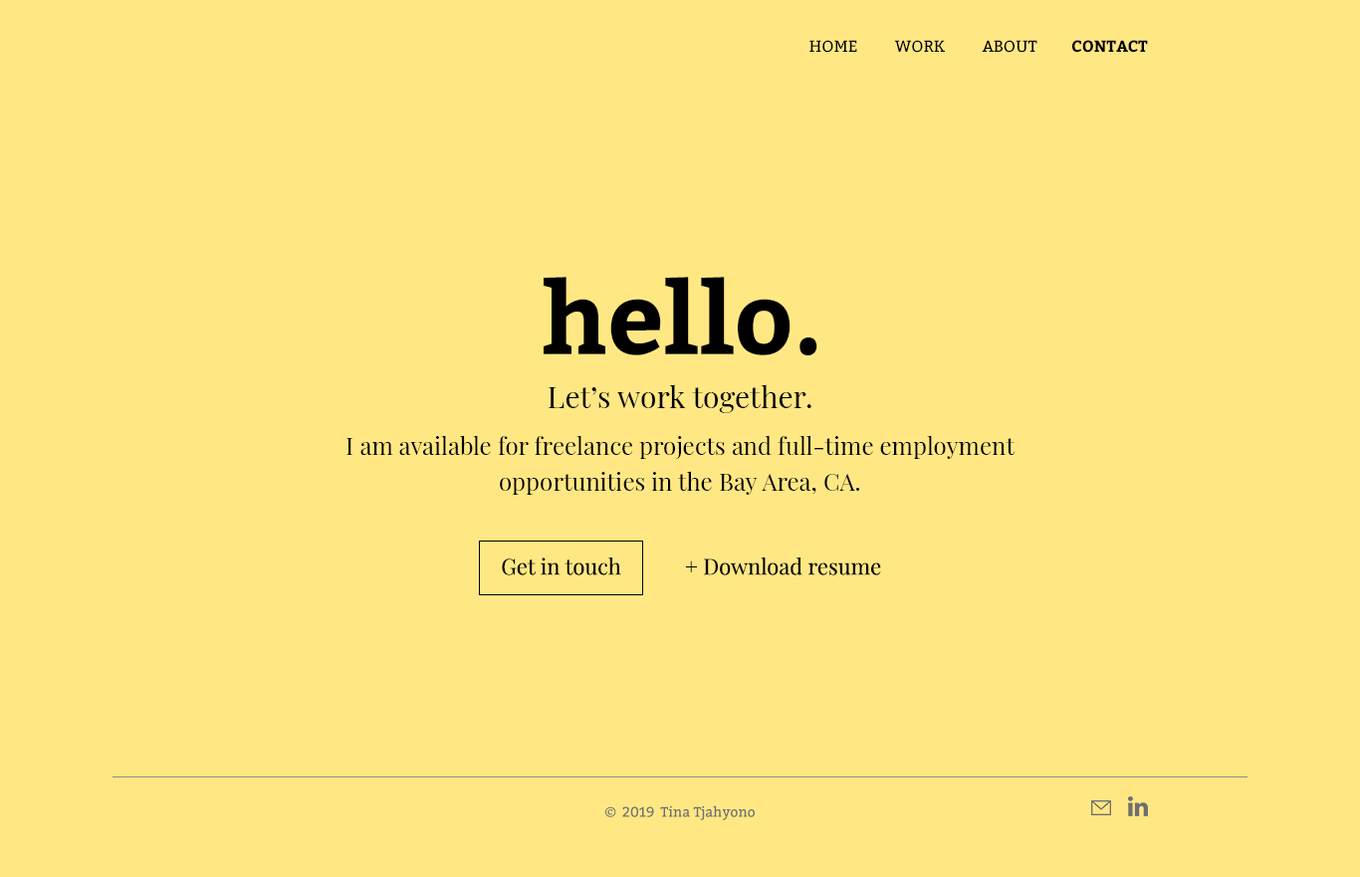
<style>
.page{position:relative;width:1360px;height:877px;background:#ffe884}
.page>*{position:absolute;margin:0}
.t1{font:15.9px "Bitter-Regular";color:#000000;text-transform:uppercase}
.t2{font:15.9px "Bitter-Bold";color:#000000;text-transform:uppercase}
.t3{font:99.5px "Bitter-Bold";color:#000000}
.t4{font:29.9px "PlayfairDisplay-Regular";color:#000000}
.t5{font:23.9px/35.8px "PlayfairDisplay-Regular";color:#000000}
.t6{font:21.9px "PlayfairDisplay-Regular";color:#000000}
.t7{font:13.9px "Bitter-Regular";color:#6d6e71}
</style>
<div class="page">
<p class="t1" style="left:809px;top:40px;width:48px;height:13px">HOME</p>
<p class="t1" style="left:894px;top:40px;width:51px;height:13px">Work</p>
<p class="t1" style="left:981px;top:40px;width:56px;height:13px">About</p>
<p class="t2" style="left:1072px;top:40px;width:76px;height:13px">Contact</p>
<p class="t3" style="left:543px;top:277px;width:274px;height:78px">hello.</p>
<p class="t4" style="left:547px;top:384px;width:264px;height:29px">Let’s work together.</p>
<p class="t5" style="left:346px;top:435px;width:669px;height:60px;text-align:center">I am available for freelance projects and full-time employment opportunities in the Bay Area, CA.</p>
<p class="t6" style="left:502px;top:557px;width:119px;height:18px">Get in touch</p>
<p class="t6" style="left:685px;top:557px;width:196px;height:18px">+ Download resume</p>
<p class="t7" style="left:605px;top:805px;width:150px;height:15px">© 2019 Tina Tjahyono</p>
</div>
